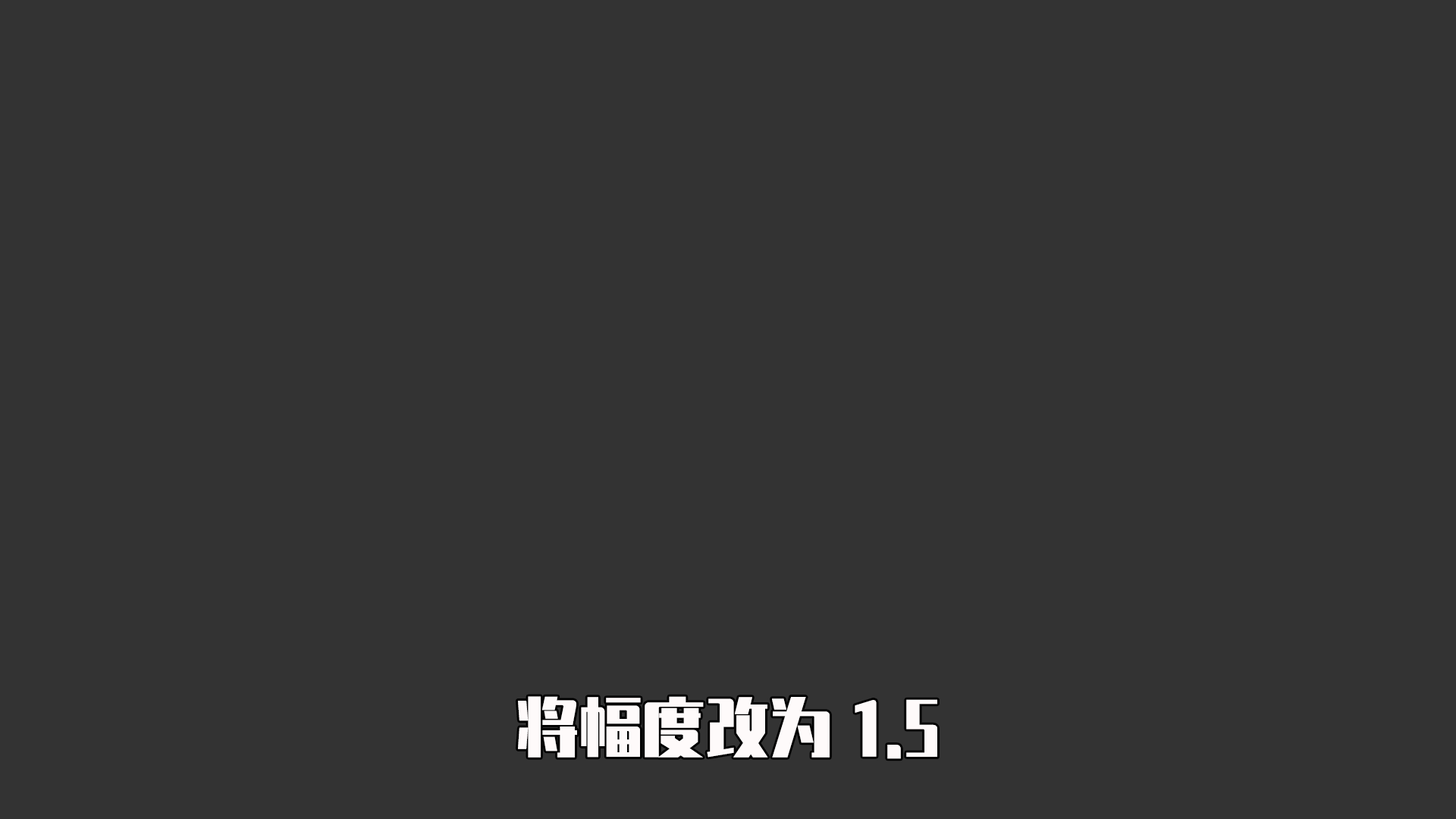
<style>
.page{position:relative;width:1456px;height:819px;background:#333333}
.page>*{position:absolute;margin:0}
.t1{font:63.2px "ZhenyanGB-Regular";color:#fefafa}
</style>
<div class="page">
<p class="t1" style="left:518px;top:696px;width:419px;height:63px">将幅度改为1.5</p>
</div>
